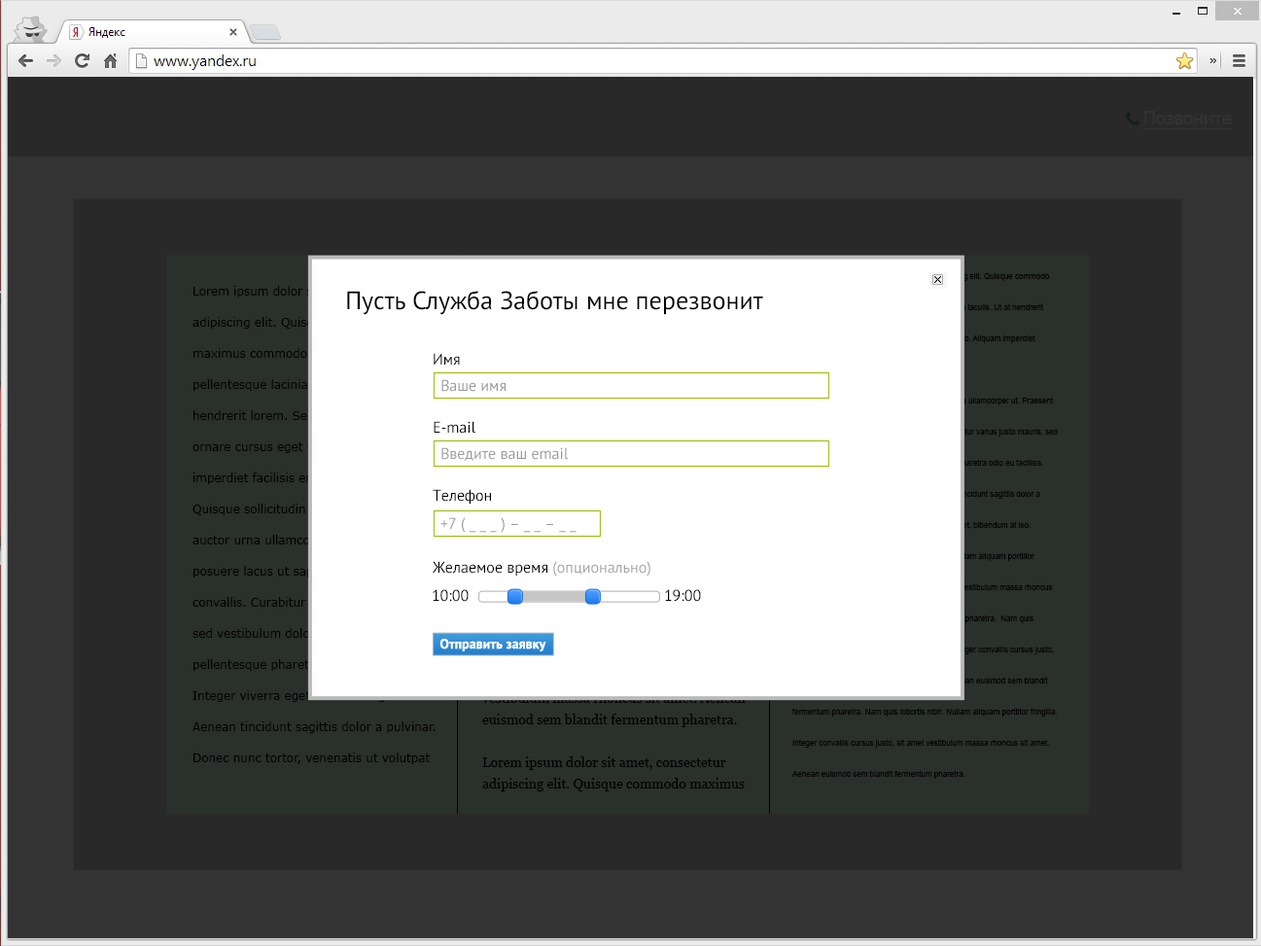
<style>
.page{position:relative;width:1261px;height:946px;background:#292929}
.page>*{position:absolute;margin:0}
.t1{font:18.1px "Tahoma";color:#333333;text-decoration:underline}
.t2{font:25.3px "PTSans-Regular";color:#000000}
.t3{font:15.6px "PTSans-Regular";color:#000000}
.t4{font:15.6px "PTSans-Regular";color:#999999}
.t5{font:15.6px "PTSans-Regular";color:#a4a4a4}
.t6{font:13.6px "PTSans-Bold";color:#ffffff}
</style>
<div class="page">
<p class="t1" style="left:1142px;top:111px;width:90px;height:18px">Позвоните</p>
<p class="t2" style="left:347px;top:291px;width:416px;height:24px">Пусть Служба Заботы мне перезвонит</p>
<p class="t3" style="left:434px;top:353px;width:26px;height:12px">Имя</p>
<p class="t4" style="left:441px;top:379px;width:64px;height:13px">Ваше имя</p>
<p class="t3" style="left:434px;top:421px;width:41px;height:13px">E-mail</p>
<p class="t4" style="left:441px;top:447px;width:128px;height:14px">Введите ваш email</p>
<p class="t3" style="left:433px;top:489px;width:58px;height:15px">Телефон</p>
<p class="t4" style="left:440px;top:517px;width:136px;height:16px">+7 ( _ _ _ ) – _ _ – _ _</p>
<p class="t3" style="left:433px;top:561px;width:217px;height:15px">Желаемое время <span class="t5">(опционально)</span></p>
<p class="t3" style="left:433px;top:589px;width:36px;height:13px">10:00</p>
<p class="t3" style="left:665px;top:589px;width:36px;height:13px">19:00</p>
<p class="t6" style="left:439px;top:639px;width:107px;height:12px">Отправить заявку</p>
</div>
